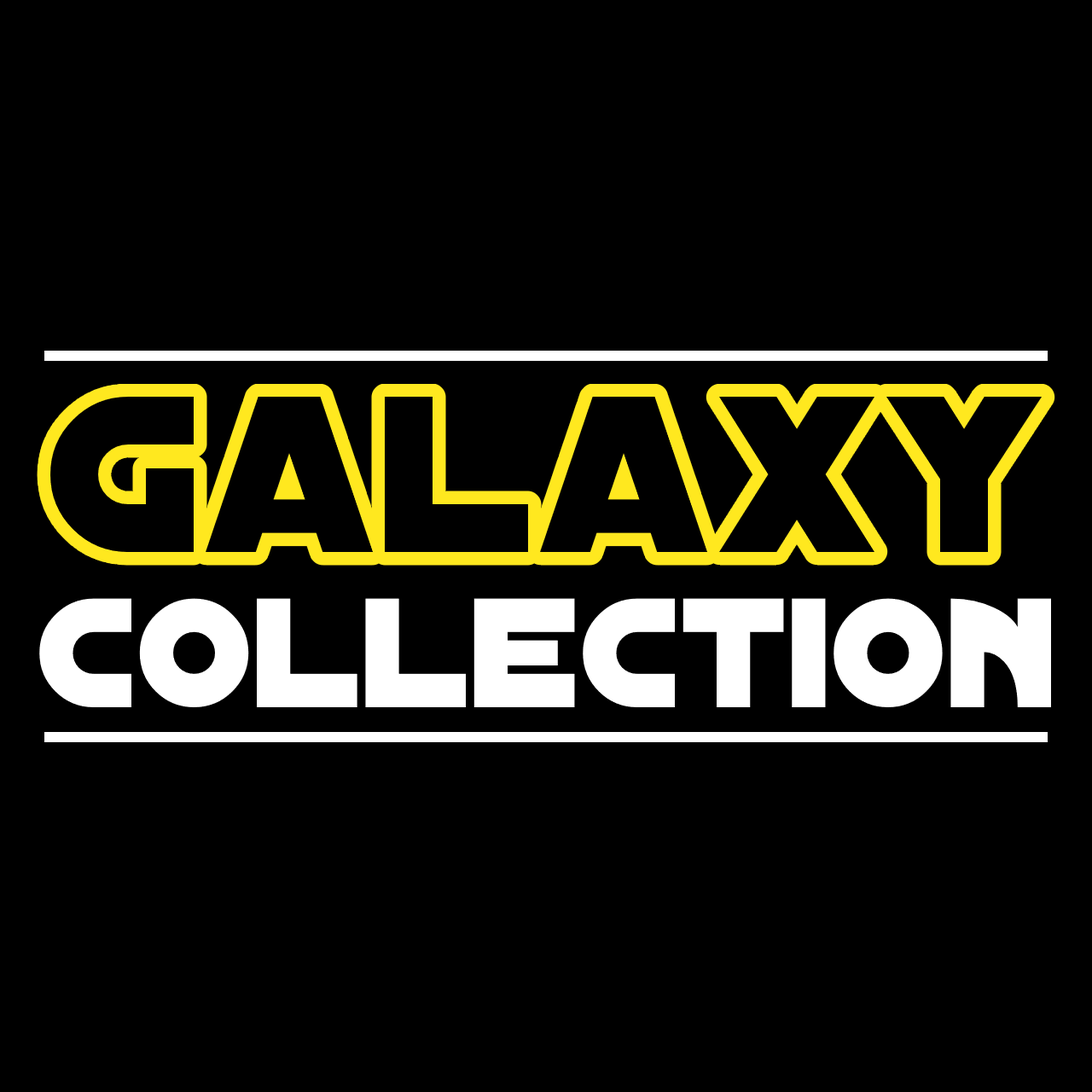
<style>
.page{position:relative;width:1092px;height:1092px;background:#000000}
.page>*{position:absolute;margin:0}
.t1{font:238.9px "DistantGalaxy";color:#000000}
.t2{font:167.2px "DistantGalaxy";color:#ffffff}
.t3{font:103px "DistantGalaxy";color:#000000}
</style>
<div class="page">
<p class="t1" style="left:49px;top:397px;width:994px;height:156px">Galaxy</p>
<p class="t2" style="left:39px;top:598px;width:1013px;height:110px"><span class="t3"><br></span>collection</p>
</div>
